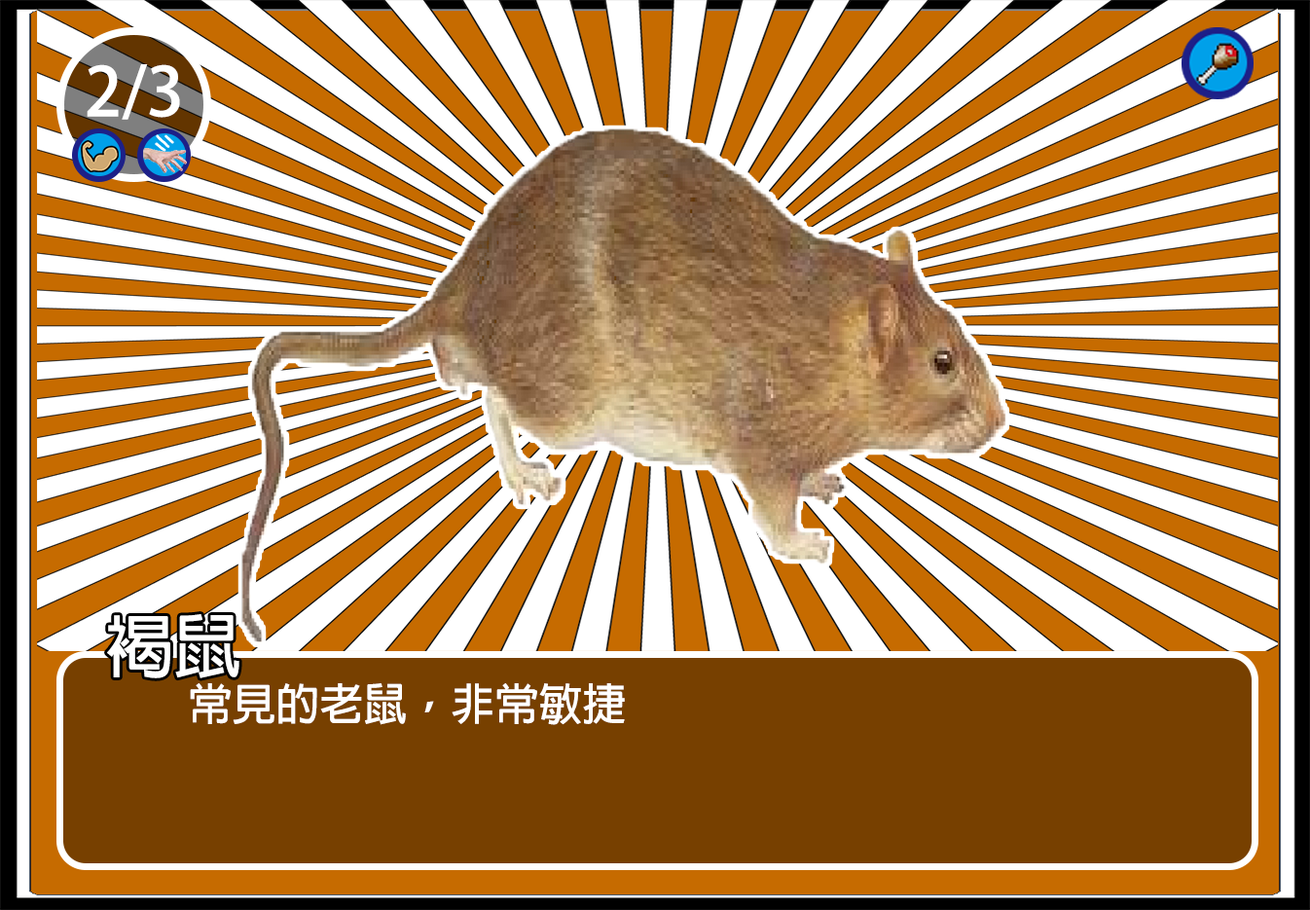
<style>
.page{position:relative;width:1310px;height:910px;background:#ffffff}
.page>*{position:absolute;margin:0}
.t1{font:66.9px "AdobeFanHeitiStd-Bold";color:#ffffff}
.t2{font:68.1px "AdobeFanHeitiStd-Bold";color:#ffffff}
.t3{font:43.8px "AdobeFanHeitiStd-Bold";color:#ffffff}
</style>
<div class="page">
<p class="t1" style="left:87px;top:64px;width:93px;height:56px">2/3</p>
<p class="t2" style="left:107px;top:614px;width:132px;height:64px">褐鼠</p>
<p class="t3" style="left:190px;top:683px;width:435px;height:42px">常見的老鼠，非常敏捷</p>
</div>
